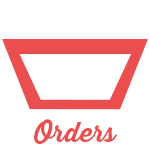
<style>
.page{position:relative;width:150px;height:150px;background:#ffffff}
.page>*{position:absolute;margin:0}
.t1{font:27px "ThirstyScript-Bold";color:#ea4e4e}
</style>
<div class="page">
<p class="t1" style="left:34px;top:119px;width:83px;height:25px">Orders</p>
</div>
